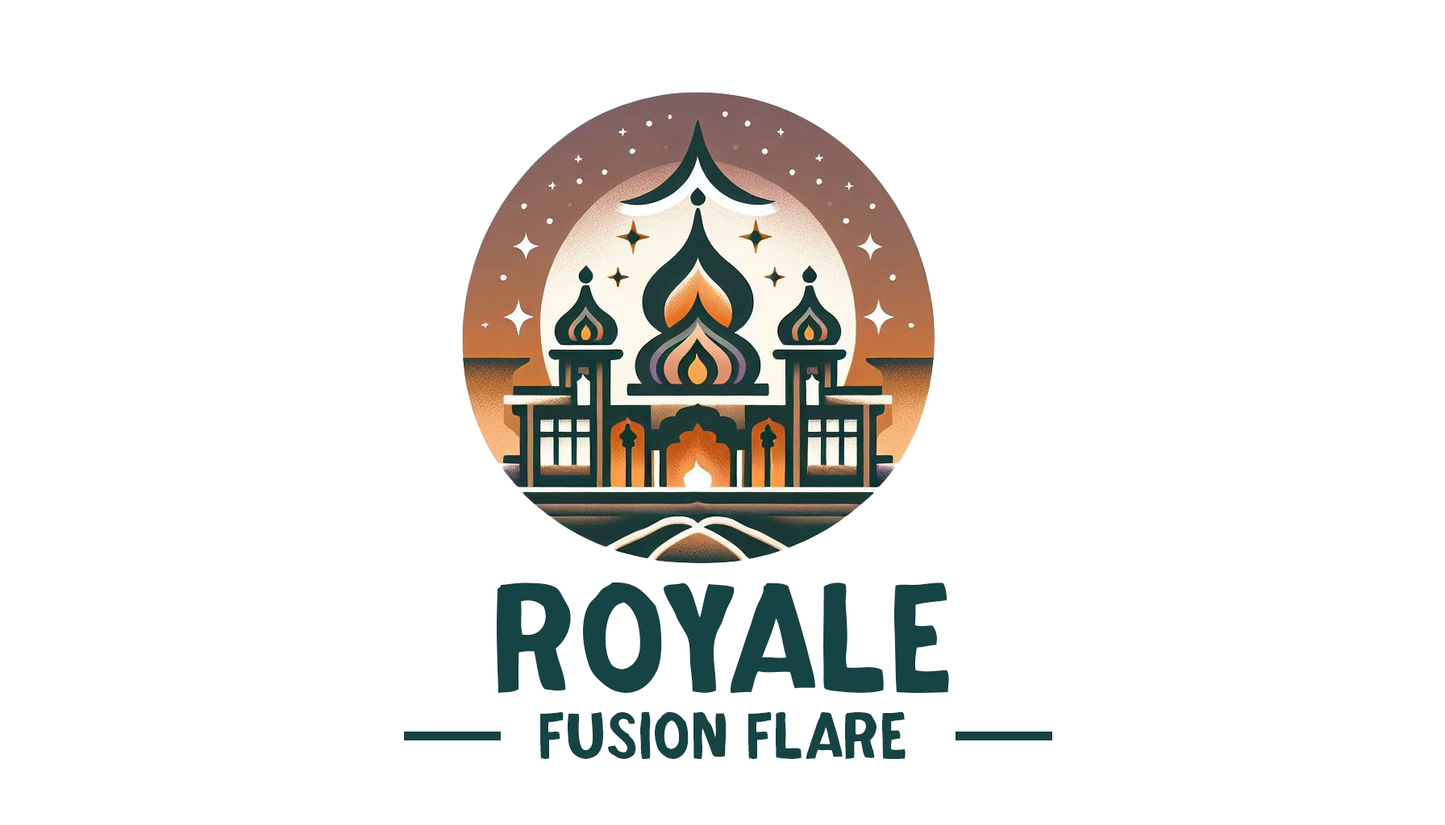
<style>
.page{position:relative;width:1445px;height:825px;background:#ffffff}
.page>*{position:absolute;margin:0}
.t1{font:161.2px "Grizzly";color:#164343}
.t2{font:68.5px "Grizzly";color:#164343}
</style>
<div class="page">
<p class="t1" style="left:496px;top:582px;width:453px;height:111px">ROYALE</p>
<p class="t2" style="left:540px;top:712px;width:365px;height:47px">Fusion FLARe</p>
</div>
